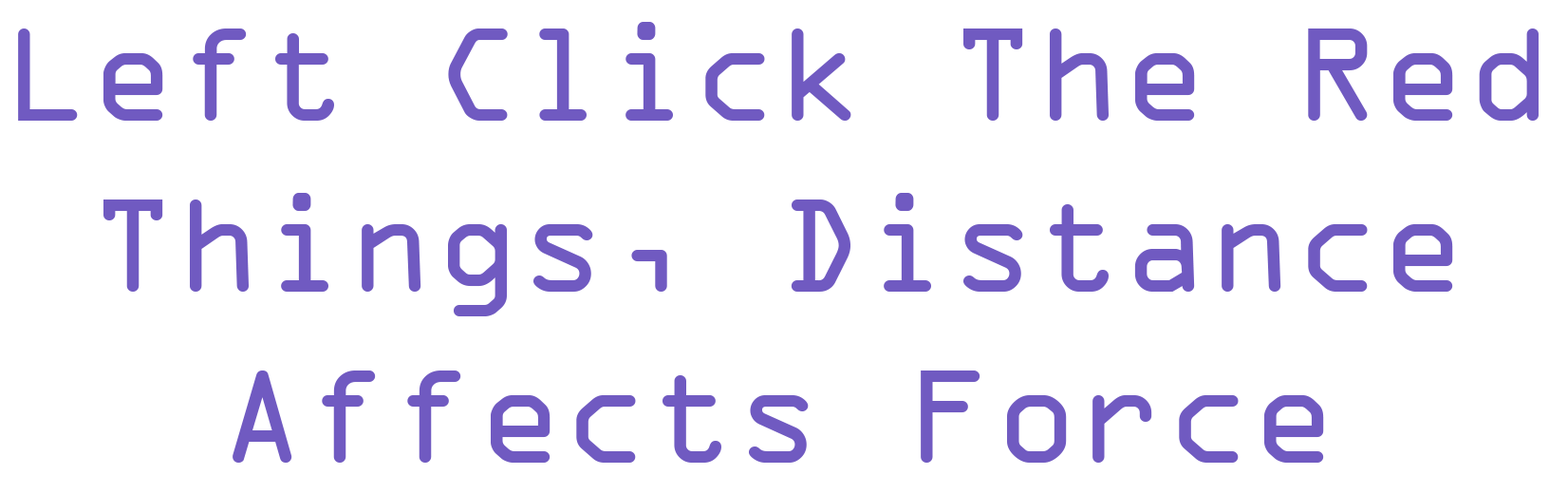
<style>
.page{position:relative;width:1568px;height:494px;background:#ffffff}
.page>*{position:absolute;margin:0}
.t1{font:142.4px "OCRAExtended";color:#705ac1}
</style>
<div class="page">
<p class="t1" style="left:18px;top:22px;width:1521px;height:440px;text-align:center">Left Click The Red Things, Distance Affects Force</p>
</div>
